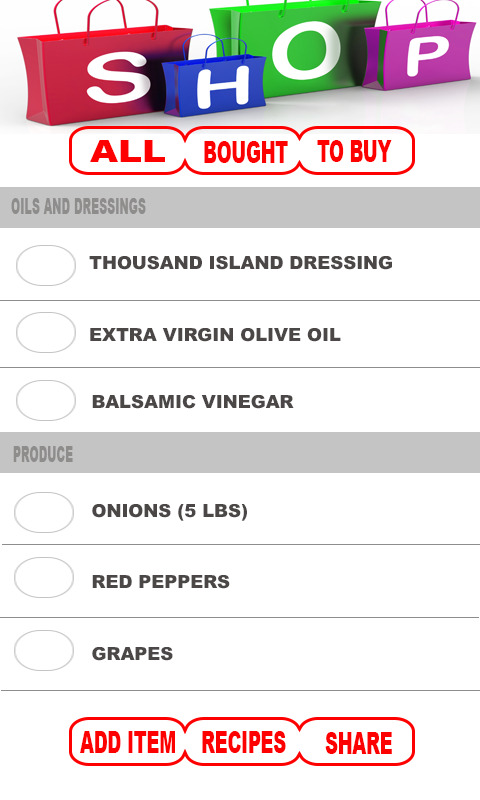
<style>
.page{position:relative;width:480px;height:800px;background:#ffffff}
.page>*{position:absolute;margin:0}
.t1{font:30.1px "Arial-Black";color:#ff0000;scale:1.2 1}
.t2{font:30.1px "Arial-Black";color:#ff0000;scale:0.59 1}
.t3{font:22.3px "Arial-Black";color:#8f8c8c;scale:0.5 1}
.t4{font:18px "Arial-Black";color:#4b4747}
</style>
<div class="page">
<p class="t1" style="left:90px;top:140px;width:75px;height:22px">ALL</p>
<p class="t2" style="left:204px;top:141px;width:84px;height:22px">BOUGHT</p>
<p class="t2" style="left:317px;top:140px;width:75px;height:22px">TO BUY</p>
<p class="t3" style="left:11px;top:198px;width:135px;height:16px">OILS AND DRESSINGS</p>
<p class="t4" style="left:89px;top:256px;width:303px;height:14px">THOUSAND ISLAND DRESSING</p>
<p class="t4" style="left:90px;top:328px;width:251px;height:14px">EXTRA VIRGIN OLIVE OIL</p>
<p class="t4" style="left:92px;top:395px;width:202px;height:14px">BALSAMIC VINEGAR</p>
<p class="t3" style="left:13px;top:446px;width:60px;height:16px">PRODUCE</p>
<p class="t4" style="left:92px;top:504px;width:155px;height:17px">ONIONS (5 LBS)</p>
<p class="t4" style="left:92px;top:575px;width:138px;height:14px">RED PEPPERS</p>
<p class="t4" style="left:92px;top:647px;width:81px;height:14px">GRAPES</p>
<p class="t2" style="left:80px;top:731px;width:95px;height:22px">ADD ITEM</p>
<p class="t2" style="left:202px;top:731px;width:84px;height:22px">RECIPES</p>
<p class="t2" style="left:325px;top:732px;width:67px;height:22px">SHARE</p>
</div>
